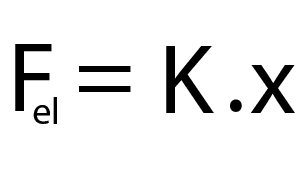
<style>
.page{position:relative;width:300px;height:170px;background:#ffffff}
.page>*{position:absolute;margin:0}
.t1{font:100px "MyriadHebrew-Regular";color:#000000}
.t2{font:38px "MyriadHebrew-Regular";color:#000000}
</style>
<div class="page">
<p class="t1" style="left:15px;top:44px;width:37px;height:67px">F</p>
<p class="t1" style="left:166px;top:46px;width:48px;height:67px">K</p>
<p class="t1" style="left:250px;top:65px;width:45px;height:48px">x</p>
<p class="t1" style="left:79px;top:66px;width:52px;height:26px">=</p>
<p class="t2" style="left:33px;top:97px;width:24px;height:27px">el</p>
<p class="t1" style="left:230px;top:99px;width:12px;height:13px">.</p>
</div>
